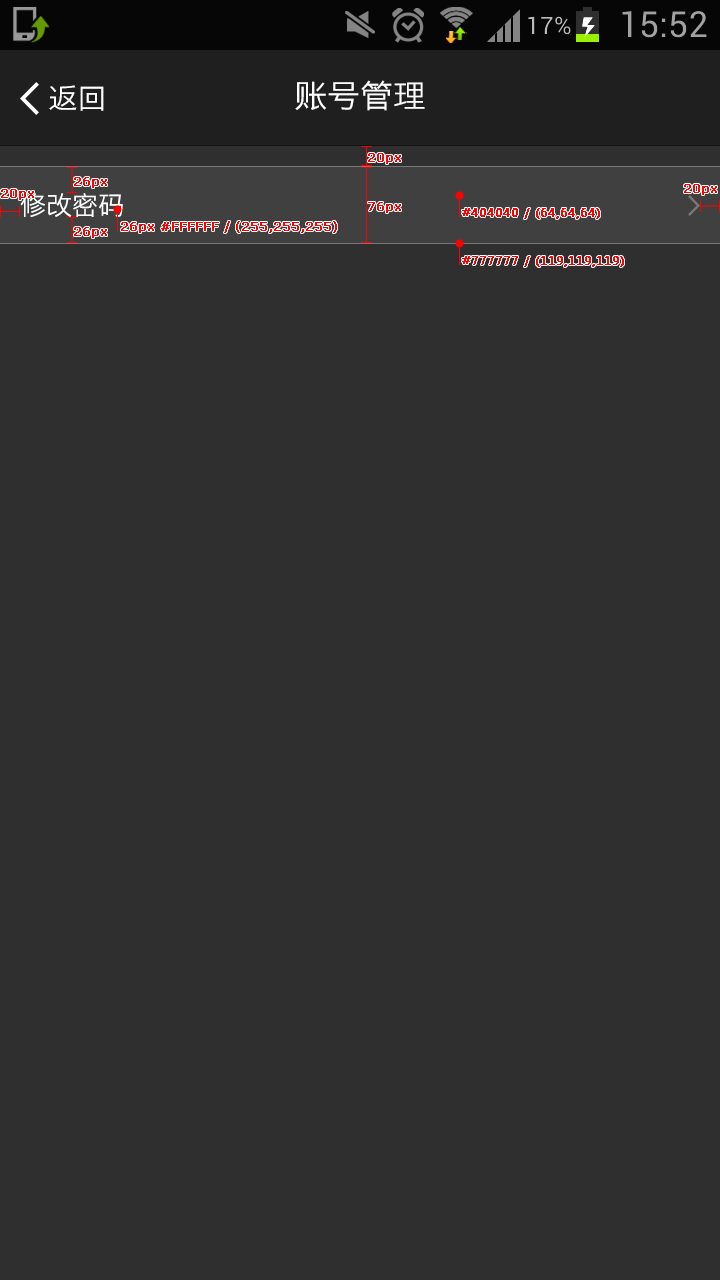
<style>
.page{position:relative;width:720px;height:1280px;background:#2f2f2f}
.page>*{position:absolute;margin:0}
.t1{font:28px "STHeitiSC-Light";color:#ffffff;scale:1.03 1}
.t2{font:32px "STHeitiSC-Light";color:#ffffff;scale:1.03 1}
.t3{font:12px "Verdana";color:#ff0000;font-weight:bold}
.t4{font:26px "STHeitiSC-Light";color:#ffffff}
.t5{font:12px "MicrosoftYaHei";color:#ff0000;font-weight:bold}
</style>
<div class="page">
<p class="t1" style="left:49px;top:85px;width:55px;height:26px">返回</p>
<p class="t2" style="left:295px;top:80px;width:130px;height:31px">账号管理</p>
<p class="t3" style="left:368px;top:153px;width:33px;height:11px">20px</p>
<p class="t3" style="left:74px;top:177px;width:33px;height:11px">26px</p>
<p class="t3" style="left:684px;top:184px;width:33px;height:11px">20px</p>
<p class="t3" style="left:1px;top:189px;width:33px;height:11px">20px</p>
<p class="t4" style="left:20px;top:193px;width:103px;height:24px">修改密码</p>
<p class="t3" style="left:368px;top:202px;width:33px;height:11px">76px</p>
<p class="t5" style="left:462px;top:208px;width:138px;height:11px">#404040 / (64,64,64)</p>
<p class="t3" style="left:121px;top:221px;width:216px;height:12px">26px #FFFFFF / (255,255,255)</p>
<p class="t3" style="left:74px;top:227px;width:33px;height:11px">26px</p>
<p class="t5" style="left:462px;top:256px;width:162px;height:11px">#777777 / (119,119,119)</p>
</div>
